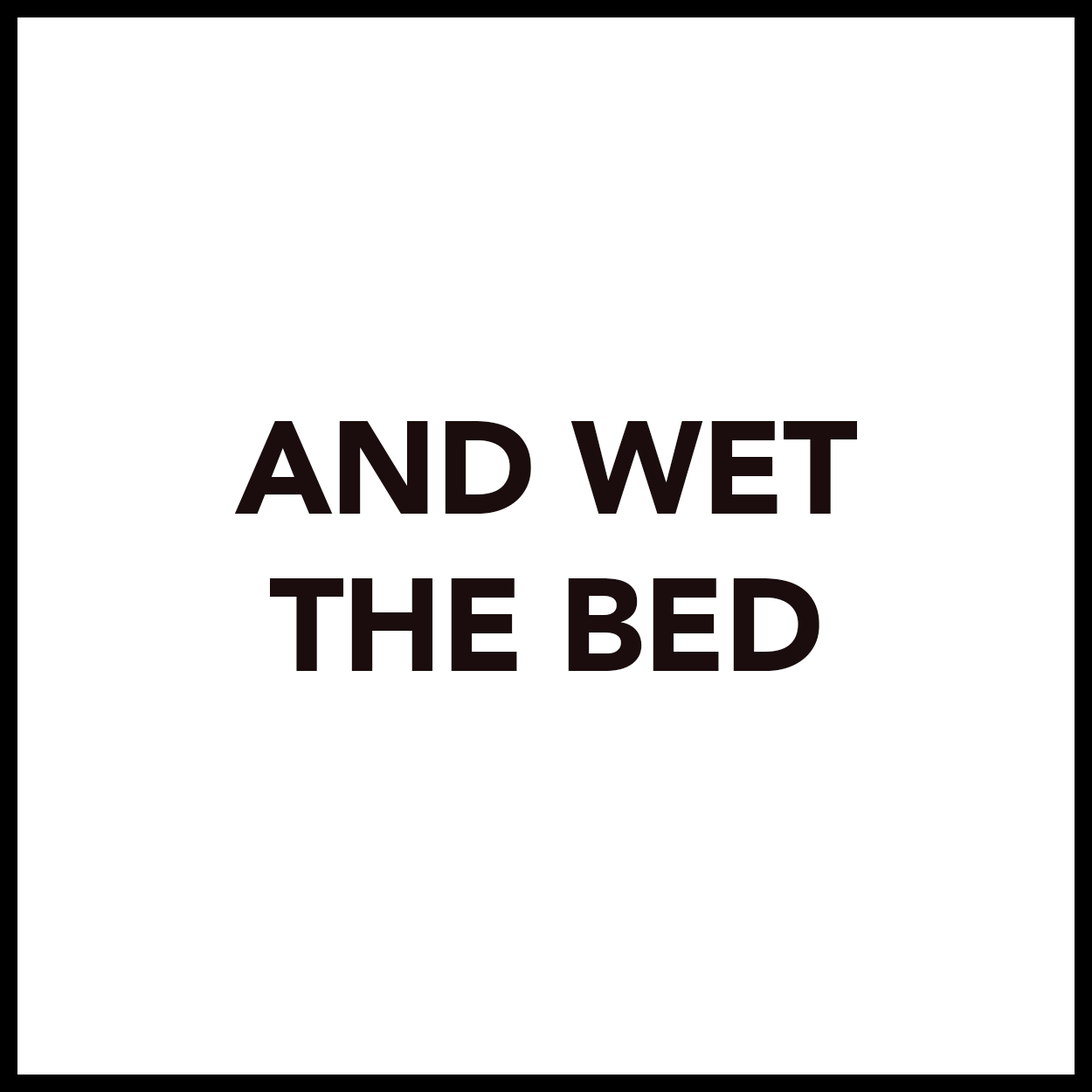
<style>
.page{position:relative;width:1092px;height:1092px;background:#ffffff}
.page>*{position:absolute;margin:0}
.t1{font:131px "Avenir-Black";letter-spacing:-0.01em;color:#1b0d0d}
</style>
<div class="page">
<p class="t1" style="left:234px;top:421px;width:624px;height:250px;text-align:center">AND WET<br>THE BED</p>
</div>
